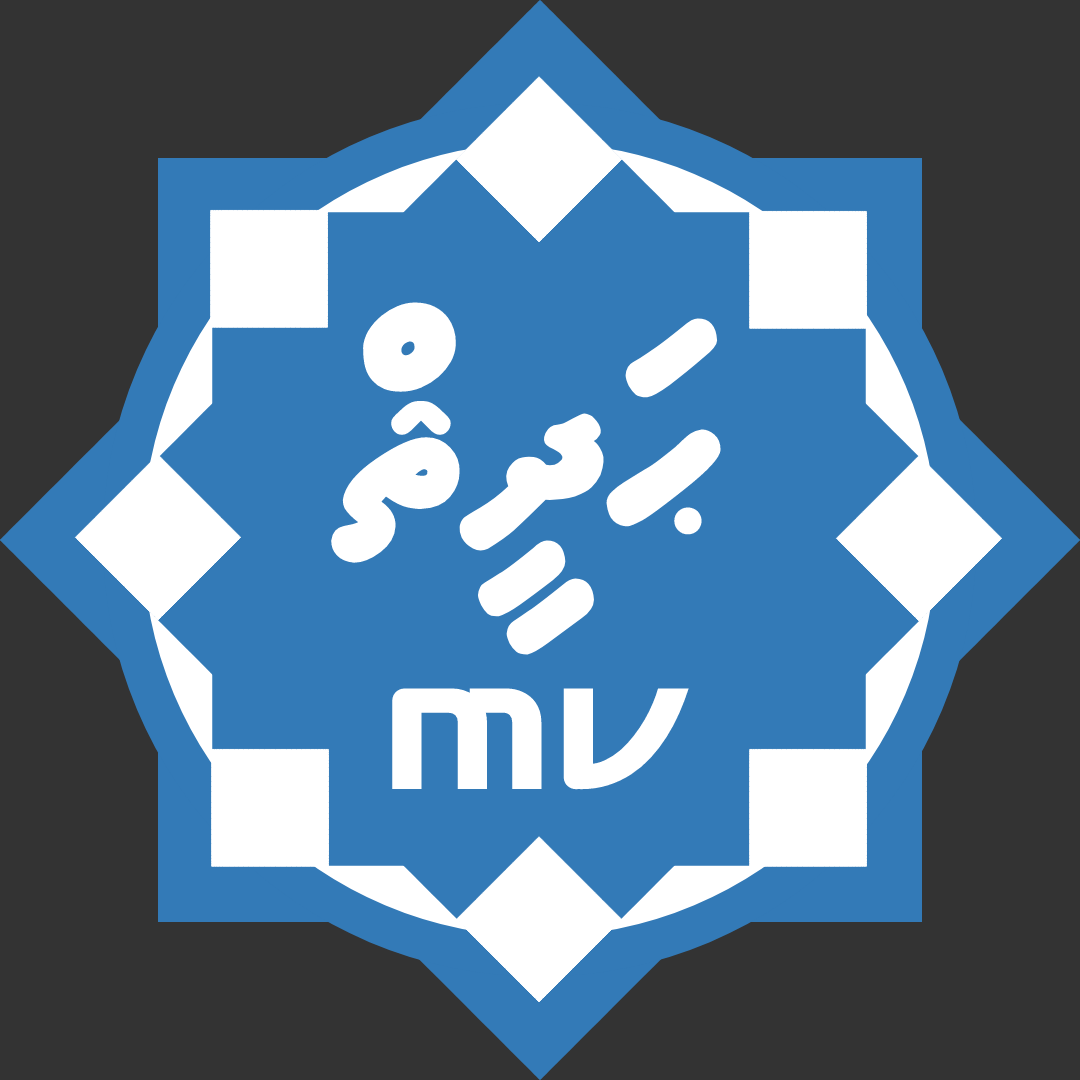
<style>
.page{position:relative;width:1080px;height:1080px;background:#337ab7}
.page>*{position:absolute;margin:0}
.t1{font:251.9px "MVAaamuFK";color:#ffffff}
.t2{font:190.4px "Audiowide-Regular";color:#ffffff;font-weight:bold}
</style>
<div class="page">
<p class="t1" style="left:331px;top:302px;width:390px;height:353px">ޙަދީޘް</p>
<p class="t2" style="left:392px;top:688px;width:297px;height:102px">mv</p>
</div>
